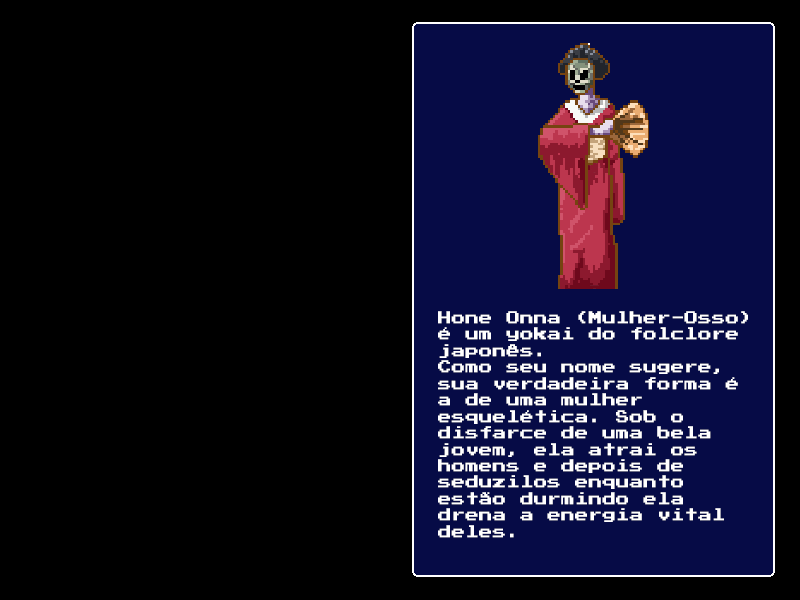
<style>
.page{position:relative;width:800px;height:600px;background:#000000}
.page>*{position:absolute;margin:0}
.t1{font:13.7px "PressStart2P";color:#ffffff}
</style>
<div class="page">
<p class="t1" style="left:438px;top:311px;width:310px;height:227px">Hone Onna (Mulher-Osso)<br>é um yokai do folclore<br>japonês.<br>Como seu nome sugere,<br>sua verdadeira forma é<br>a de uma mulher<br>esquelética. Sob o<br>disfarce de uma bela<br>jovem, ela atrai os<br>homens e depois de<br>seduzilos enquanto<br>estão durmindo ela<br>drena a energia vital<br>deles.</p>
</div>
